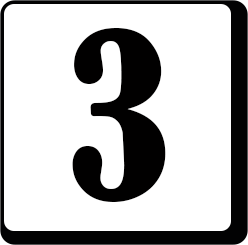
<style>
.page{position:relative;width:248px;height:245px;background:#ffffff}
.page>*{position:absolute;margin:0}
.t1{font:216px "BernardMT-Condensed";color:#010000}
</style>
<div class="page">
<p class="t1" style="left:72px;top:28px;width:94px;height:174px">3</p>
</div>
